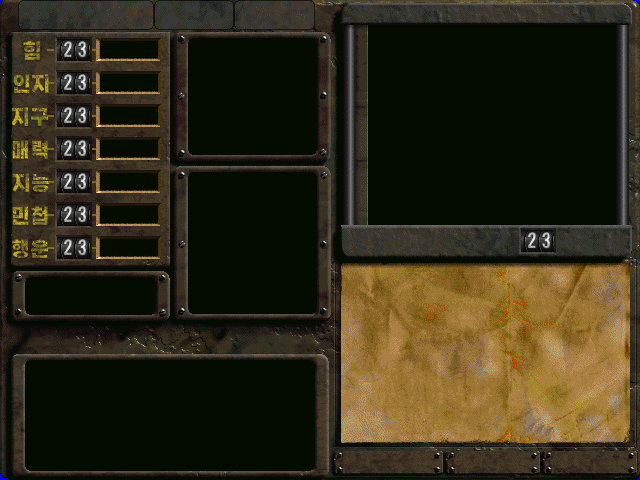
<style>
.page{position:relative;width:640px;height:480px;background:#040c00}
.page>*{position:absolute;margin:0}
.t1{font:19.8px "HakgyoansimPosterB"}
</style>
<div class="page">
<p class="t1" style="left:23px;top:41px;width:17px;height:19px">힘</p>
<p class="t1" style="left:13px;top:74px;width:36px;height:19px">인지</p>
<p class="t1" style="left:11px;top:107px;width:37px;height:19px">지구</p>
<p class="t1" style="left:12px;top:140px;width:36px;height:19px">매력</p>
<p class="t1" style="left:12px;top:173px;width:38px;height:19px">지능</p>
<p class="t1" style="left:12px;top:206px;width:36px;height:19px">민첩</p>
<p class="t1" style="left:12px;top:239px;width:36px;height:19px">행운</p>
</div>
